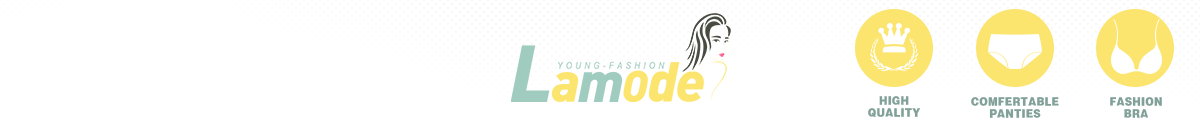
<style>
.page{position:relative;width:1200px;height:128px;background:#ffffff}
.page>*{position:absolute;margin:0}
.t1{font:10px "FZYDTHJW--GB1-0";letter-spacing:0.025em;color:#81a097;text-transform:uppercase}
</style>
<div class="page">
<p class="t1" style="left:868px;top:96px;width:52px;height:22px;text-align:center">high<br>quality</p>
<p class="t1" style="left:971px;top:97px;width:88px;height:21px;text-align:center">comfertable<br>panties</p>
<p class="t1" style="left:1110px;top:97px;width:52px;height:21px;text-align:center">fashion<br>bra</p>
</div>
